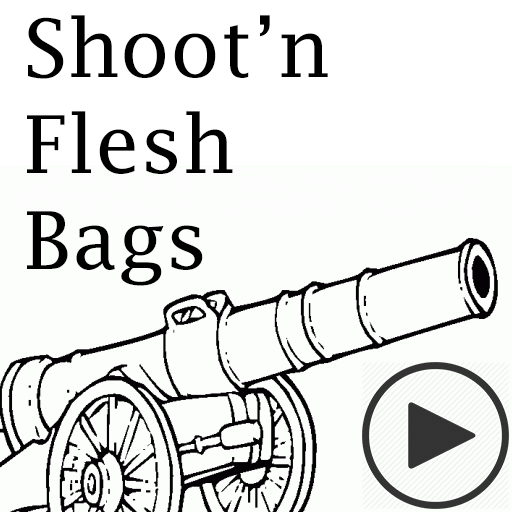
<style>
.page{position:relative;width:512px;height:512px;background:#fcfefc}
.page>*{position:absolute;margin:0}
.t1{font:80px "LucidaFax";color:#000000}
</style>
<div class="page">
<p class="t1" style="left:27px;top:15px;width:301px;height:271px">Shoot’n<br>Flesh<br>Bags</p>
</div>
